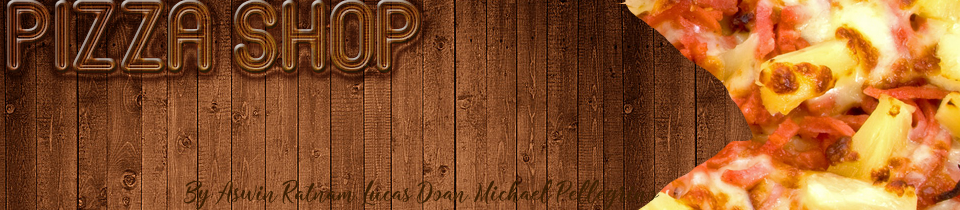
<style>
.page{position:relative;width:960px;height:210px}
.page>*{position:absolute;margin:0}
.t1{font:75px "TheJackBronwSt"}
.t2{font:25px "RestaurantsScript-Medium";color:#3e2002}
</style>
<div class="page">
<p class="t1" style="left:7px;top:0px;width:414px;height:73px">Pizza Shop</p>
<p class="t2" style="left:184px;top:179px;width:476px;height:31px">By: Aswin Ratnam, Lucas Doan. Michael Pellegrino</p>
</div>
